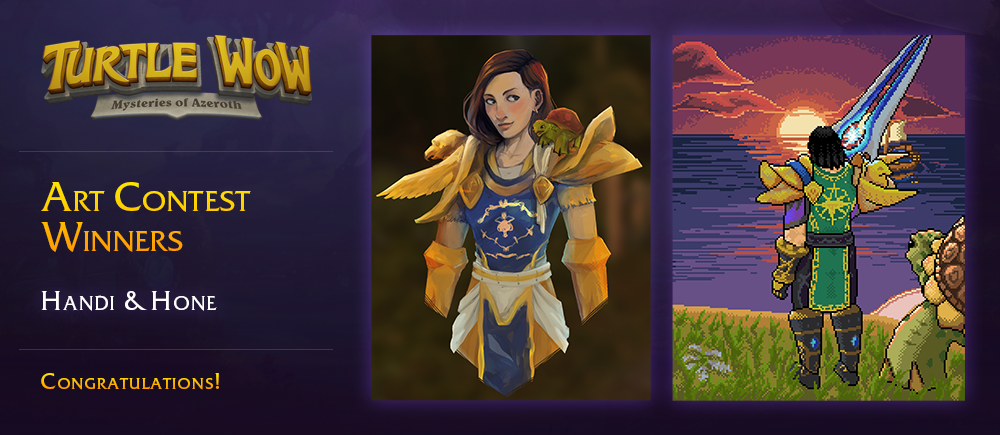
<style>
.page{position:relative;width:1000px;height:435px}
.page>*{position:absolute;margin:0}
.t1{font:40.8px/40px "FrizQuadrataC";letter-spacing:0.01em;font-variant:small-caps}
.t2{font:27px "FrizQuadrataC";letter-spacing:0.075em;color:#ffffff;font-variant:small-caps}
.t3{font:22px "FrizQuadrataC";letter-spacing:0.075em;font-variant:small-caps}
</style>
<div class="page">
<p class="t1" style="left:41px;top:182px;width:210px;height:70px">Art Contest <br>Winners</p>
<p class="t2" style="left:41px;top:291px;width:176px;height:20px">Handi &amp; Hone</p>
<p class="t3" style="left:41px;top:373px;width:178px;height:17px">Congratulations!</p>
</div>
